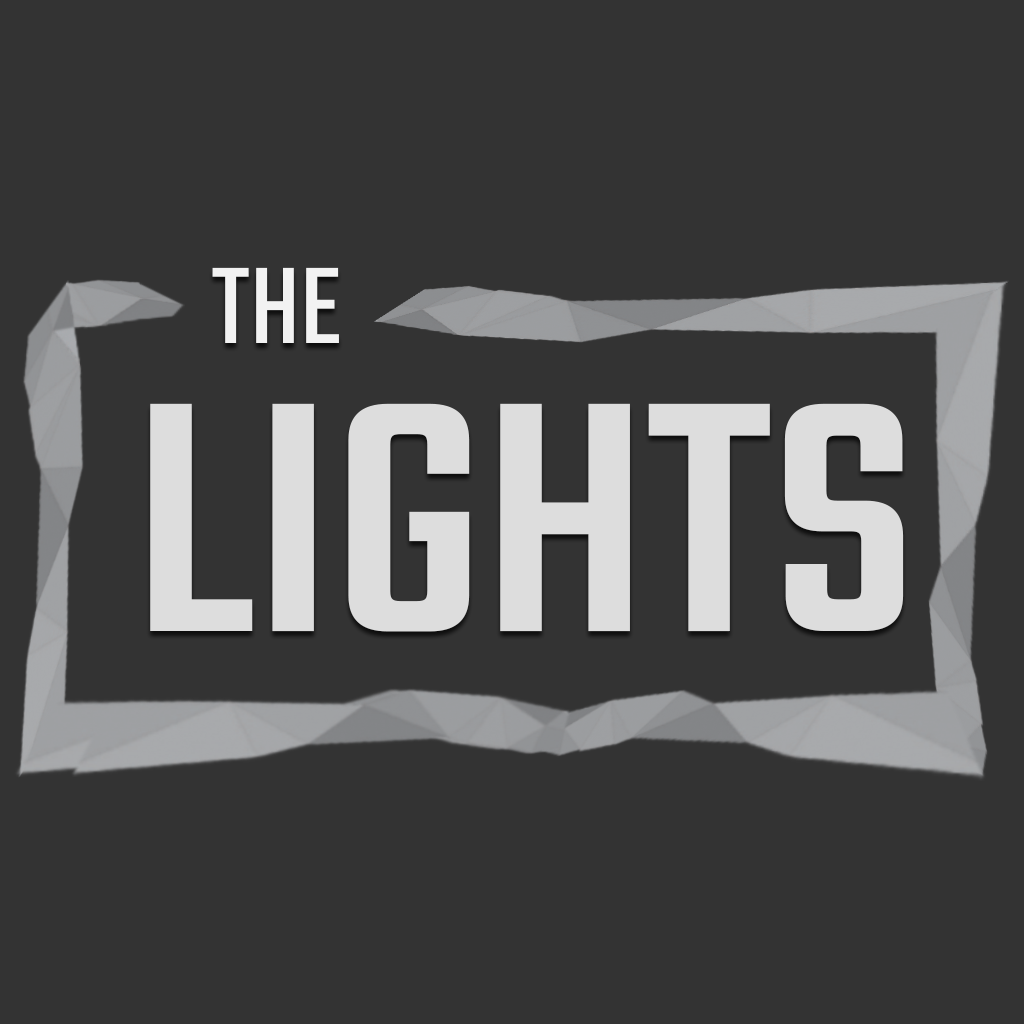
<style>
.page{position:relative;width:1024px;height:1024px;background:#333333}
.page>*{position:absolute;margin:0}
.t1{font:120px "Teko-Regular";color:#f2f2f2}
.t2{font:360px "Teko-Medium";color:#dddddd}
</style>
<div class="page">
<p class="t1" style="left:212px;top:267px;width:127px;height:76px">THE</p>
<p class="t2" style="left:150px;top:403px;width:754px;height:229px">LIGHTS</p>
</div>
